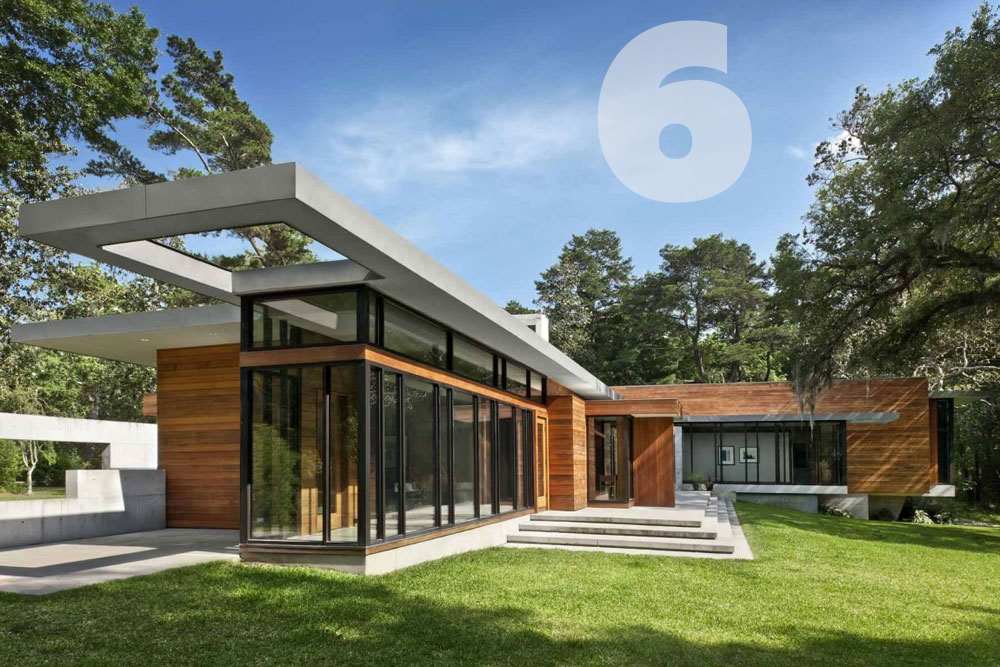
<style>
.page{position:relative;width:1000px;height:667px}
.page>*{position:absolute;margin:0}
.t1{font:250px "Prompt-Black";color:#c4d5e8}
</style>
<div class="page">
<p class="t1" style="left:597px;top:20px;width:155px;height:183px">6</p>
</div>
